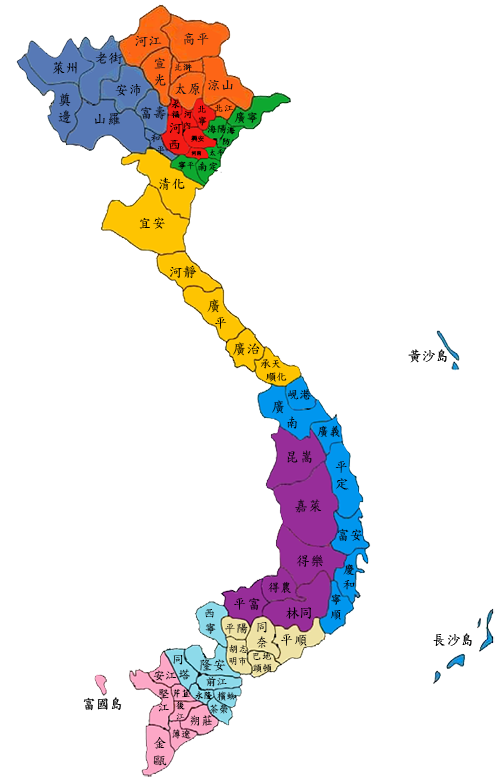
<style>
.page{position:relative;width:500px;height:783px;background:#ffffff}
.page>*{position:absolute;margin:0}
.t1{font:14px "DFKaiShu-SB-Estd-BF";color:#151515}
.t2{font:14px "DFKaiShu-SB-Estd-BF";color:#030303}
.t3{font:9px "DFKaiShu-SB-Estd-BF";color:#151515}
.t4{font:9px "DFKaiShu-SB-Estd-BF";color:#000000}
.t5{font:14px "DFKaiShu-SB-Estd-BF"}
.t6{font:9px "DFKaiShu-SB-Estd-BF"}
.t7{font:10px "DFKaiShu-SB-Estd-BF"}
.t8{font:10px "DFKaiShu-SB-Estd-BF";color:#000000}
.t9{font:12px "DFKaiShu-SB-Estd-BF"}
.t10{font:14px "DFKaiShu-SB-Estd-BF";color:#000000}
.t11{font:9px "DFKaiShu-SB-Estd-BF";color:#030303}
.t12{font:6.7px "SimSun";color:#000000}
.t13{font:5px "SimSun";color:#000000}
.t14{font:8px "DFKaiShu-SB-Estd-BF";color:#030303}
.t15{font:9px "DFKaiShu-SB-Estd-BF";color:#040404}
.t16{font:11px "DFKaiShu-SB-Estd-BF"}
.t17{font:14px "DFKaiShu-SB-Estd-BF";color:#010101}
.t18{font:11px "DFKaiShu-SB-Estd-BF";color:#000000}
.t19{font:12px "DFKaiShu-SB-Estd-BF";color:#020202}
.t20{font:14px "DFKaiShu-SB-Estd-BF";color:#020202}
.t21{font:14px "DFKaiShu-SB-Estd-BF";color:#050505}
.t22{font:12px "DFKaiShu-SB-Estd-BF";color:#040404}
.t23{font:13px "DFKaiShu-SB-Estd-BF";color:#040404}
.t24{font:14px "DFKaiShu-SB-Estd-BF";color:#040404}
.t25{font:10px "DFKaiShu-SB-Estd-BF";color:#040404}
.t26{font:12px "DFKaiShu-SB-Estd-BF";color:#000000}
.t27{font:11px "DFKaiShu-SB-Estd-BF";color:#040404}
</style>
<div class="page">
<p class="t1" style="left:135px;top:36px;width:27px;height:11px">河江</p>
<p class="t1" style="left:184px;top:33px;width:25px;height:12px">高平</p>
<p class="t2" style="left:95px;top:52px;width:28px;height:12px">老街</p>
<p class="t2" style="left:53px;top:61px;width:24px;height:13px">萊州</p>
<p class="t1" style="left:154px;top:57px;width:12px;height:29px">宣<br>光</p>
<p class="t3" style="left:174px;top:63px;width:18px;height:9px">北滸</p>
<p class="t2" style="left:115px;top:84px;width:26px;height:12px">安沛</p>
<p class="t1" style="left:175px;top:83px;width:25px;height:12px">太原</p>
<p class="t1" style="left:208px;top:80px;width:25px;height:11px">涼山</p>
<p class="t2" style="left:58px;top:93px;width:13px;height:31px">奠<br>邊</p>
<p class="t4" style="left:171px;top:100px;width:9px;height:19px">永<br>福</p>
<p class="t2" style="left:94px;top:112px;width:26px;height:14px">山羅</p>
<p class="t5" style="left:141px;top:106px;width:25px;height:14px">富壽</p>
<p class="t6" style="left:183px;top:111px;width:10px;height:18px">河<br>內</p>
<p class="t7" style="left:198px;top:105px;width:9px;height:21px">北<br>寧</p>
<p class="t8" style="left:214px;top:104px;width:20px;height:8px">北江</p>
<p class="t9" style="left:234px;top:111px;width:23px;height:13px">廣寧</p>
<p class="t10" style="left:169px;top:123px;width:13px;height:27px">河<br>西</p>
<p class="t7" style="left:207px;top:124px;width:20px;height:10px">海陽</p>
<p class="t11" style="left:222px;top:126px;width:14px;height:20px">海<br>防</p>
<p class="t7" style="left:151px;top:134px;width:14px;height:21px">和<br> 平</p>
<p class="t12" style="left:191px;top:135px;width:13px;height:7px">興安</p>
<p class="t13" style="left:191px;top:150px;width:11px;height:6px">河南</p>
<p class="t14" style="left:209px;top:149px;width:15px;height:7px">太平</p>
<p class="t15" style="left:178px;top:161px;width:17px;height:9px">寧平</p>
<p class="t16" style="left:198px;top:161px;width:20px;height:11px">南定</p>
<p class="t17" style="left:159px;top:177px;width:26px;height:13px">清化</p>
<p class="t10" style="left:139px;top:217px;width:26px;height:12px">宜安</p>
<p class="t10" style="left:170px;top:265px;width:27px;height:14px">河靜</p>
<p class="t10" style="left:207px;top:299px;width:20px;height:30px">廣<br>  平</p>
<p class="t10" style="left:233px;top:342px;width:27px;height:14px">廣治</p>
<p class="t10" style="left:408px;top:349px;width:39px;height:14px">黃沙島</p>
<p class="t18" style="left:261px;top:359px;width:26px;height:23px">承天<br> 順化</p>
<p class="t19" style="left:288px;top:389px;width:23px;height:11px">峴港</p>
<p class="t20" style="left:272px;top:400px;width:25px;height:29px">廣<br>  南</p>
<p class="t9" style="left:317px;top:425px;width:23px;height:12px">廣義</p>
<p class="t21" style="left:287px;top:450px;width:25px;height:14px">昆嵩</p>
<p class="t20" style="left:335px;top:461px;width:14px;height:29px">平<br>定</p>
<p class="t21" style="left:295px;top:499px;width:27px;height:14px">嘉萊</p>
<p class="t20" style="left:337px;top:528px;width:26px;height:14px">富安</p>
<p class="t10" style="left:296px;top:554px;width:28px;height:13px">得樂</p>
<p class="t19" style="left:343px;top:564px;width:12px;height:26px">慶<br>和</p>
<p class="t9" style="left:268px;top:581px;width:23px;height:12px">得農</p>
<p class="t10" style="left:234px;top:597px;width:26px;height:14px">平富</p>
<p class="t19" style="left:330px;top:594px;width:11px;height:26px">寧<br>順</p>
<p class="t22" style="left:205px;top:609px;width:11px;height:25px">西<br>寧</p>
<p class="t10" style="left:286px;top:607px;width:25px;height:12px">林同</p>
<p class="t9" style="left:225px;top:623px;width:23px;height:11px">平陽</p>
<p class="t23" style="left:257px;top:622px;width:11px;height:26px">同<br>奈</p>
<p class="t24" style="left:281px;top:634px;width:26px;height:12px">平順</p>
<p class="t10" style="left:433px;top:633px;width:39px;height:13px">長沙島</p>
<p class="t7" style="left:229px;top:644px;width:18px;height:22px">胡志<br>明市</p>
<p class="t25" style="left:252px;top:652px;width:20px;height:21px">巴地<br>頭頓</p>
<p class="t22" style="left:173px;top:655px;width:17px;height:25px">同<br> 塔</p>
<p class="t24" style="left:200px;top:659px;width:26px;height:12px">隆安</p>
<p class="t26" style="left:153px;top:670px;width:24px;height:11px">安江</p>
<p class="t27" style="left:206px;top:676px;width:21px;height:11px">前江</p>
<p class="t26" style="left:158px;top:689px;width:11px;height:23px">堅<br>江</p>
<p class="t4" style="left:173px;top:689px;width:17px;height:9px">芹苴</p>
<p class="t10" style="left:83px;top:697px;width:39px;height:14px">富國島</p>
<p class="t4" style="left:176px;top:701px;width:9px;height:19px">後<br>江</p>
<p class="t15" style="left:195px;top:691px;width:18px;height:9px">永隆</p>
<p class="t7" style="left:217px;top:691px;width:20px;height:10px">檳蜘</p>
<p class="t7" style="left:209px;top:704px;width:19px;height:10px">茶榮</p>
<p class="t26" style="left:190px;top:715px;width:22px;height:11px">朔莊</p>
<p class="t10" style="left:153px;top:737px;width:14px;height:29px">金<br>甌</p>
<p class="t7" style="left:172px;top:729px;width:19px;height:10px">薄遼</p>
</div>
